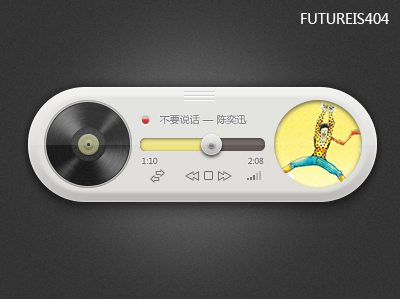
<style>
.page{position:relative;width:400px;height:299px}
.page>*{position:absolute;margin:0}
.t1{font:13.9px "MicrosoftYaHei";color:#ffffff}
.t2{font:10px "MicrosoftYaHei";color:#767676}
.t3{font:8px "MicrosoftYaHei";color:#656565}
.t4{font:8px "MicrosoftYaHei"}
</style>
<div class="page">
<p class="t1" style="left:301px;top:13px;width:88px;height:11px">FUTUREIS404</p>
<p class="t2" style="left:159px;top:114px;width:88px;height:11px">不要说话 — 陈奕迅</p>
<p class="t3" style="left:142px;top:157px;width:16px;height:8px">1:10</p>
<p class="t4" style="left:248px;top:157px;width:16px;height:8px">2:08</p>
</div>
